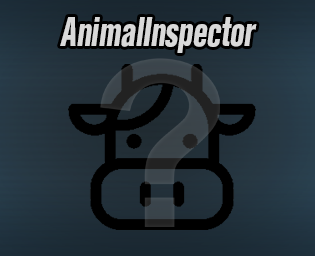
<style>
.page{position:relative;width:315px;height:256px}
.page>*{position:absolute;margin:0}
.t1{font:39.6px "AkzidenzGroteskBQ-XBdCnd";letter-spacing:-0.005em;color:#d9d9d9;font-style:italic;scale:0.75 1}
</style>
<div class="page">
<p class="t1" style="left:60px;top:17px;width:197px;height:36px">AnimalInspector</p>
</div>
